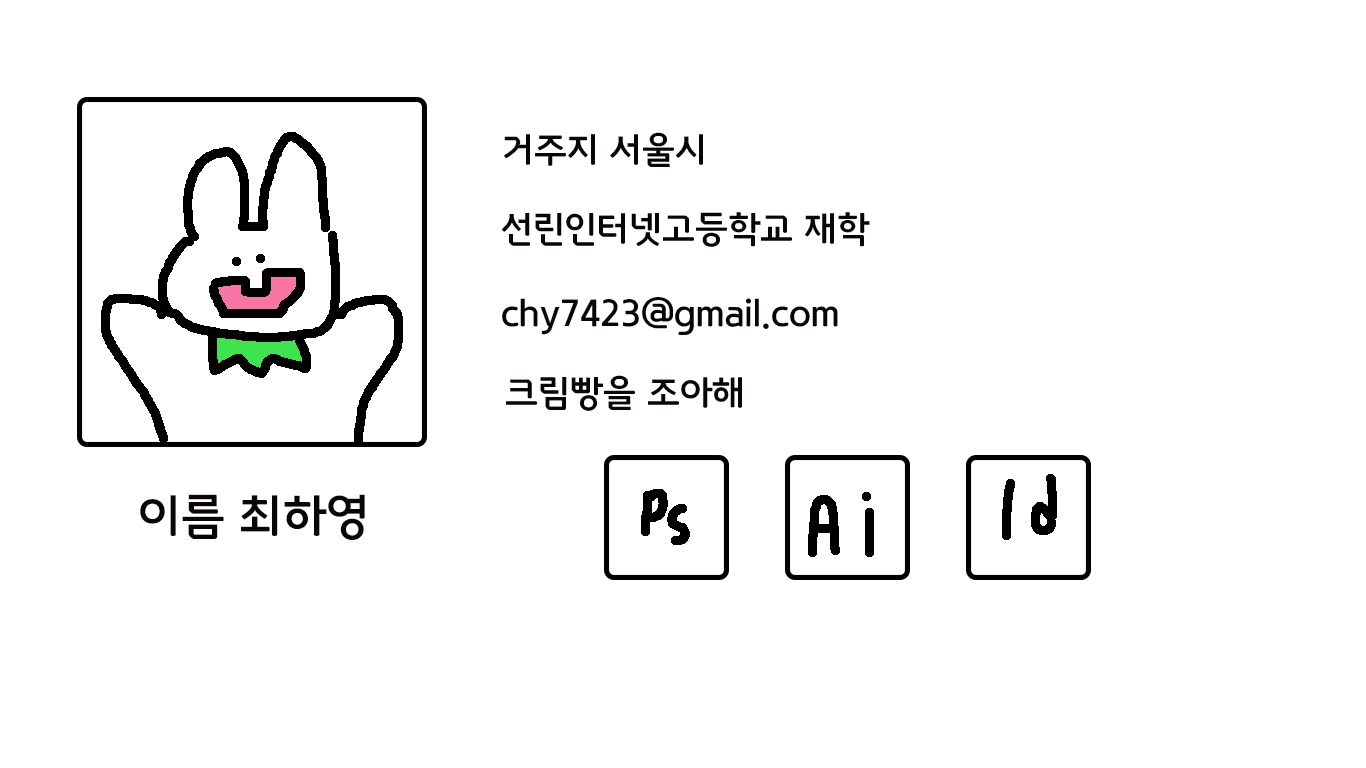
<style>
.page{position:relative;width:1366px;height:768px;background:#ffffff}
.page>*{position:absolute;margin:0}
.t1{font:36px "GodoM";color:#090605}
.t2{font:48px "GodoM";color:#090605}
</style>
<div class="page">
<p class="t1" style="left:504px;top:132px;width:199px;height:35px">거주지 서울시</p>
<p class="t1" style="left:502px;top:212px;width:368px;height:35px">선린인터넷고등학교 재학</p>
<p class="t1" style="left:502px;top:297px;width:336px;height:38px">chy7423@gmail.com</p>
<p class="t1" style="left:506px;top:375px;width:236px;height:36px">크림빵을 조아해</p>
<p class="t2" style="left:140px;top:494px;width:225px;height:46px">이름 최하영</p>
</div>
